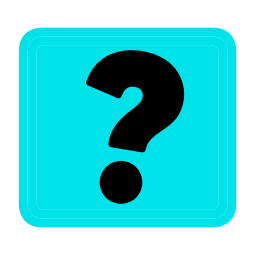
<style>
.page{position:relative;width:256px;height:256px;background:#00e2ea}
.page>*{position:absolute;margin:0}
.t1{font:204.6px "MADETOMMY-Bold";color:#000000}
</style>
<div class="page">
<p class="t1" style="left:88px;top:53px;width:94px;height:148px;rotate:9deg">?</p>
</div>
